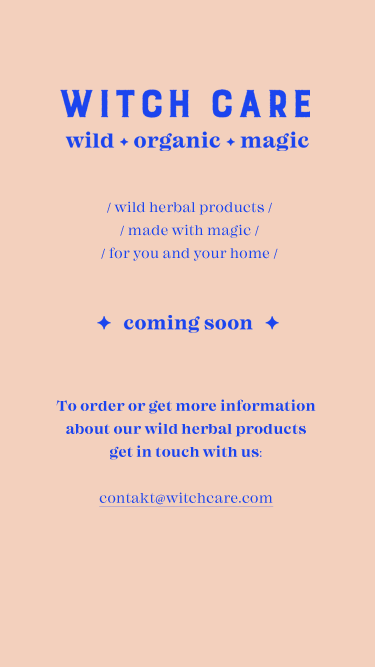
<style>
.page{position:relative;width:375px;height:667px;background:#f3d0bd}
.page>*{position:absolute;margin:0}
.t1{font:14px/23px "MackayDEMO-Regular";letter-spacing:0.025em;color:#1b44ee}
.t2{font:14px/23px "MinionPro-Regular";letter-spacing:0.025em;color:#1b44ee}
.t3{font:14px/23px "MackayDEMO-Bold";letter-spacing:0.025em;color:#1b44ee}
.t4{font:14px/23px "MackayDEMO-Regular";letter-spacing:0.025em;color:#1b44ee;text-decoration:underline}
.t5{font:14px/23px "MinionPro-Regular";letter-spacing:0.025em;color:#1b44ee;text-decoration:underline}
</style>
<div class="page">
<p class="t1" style="left:101px;top:201px;width:177px;height:60px;text-align:center"><span class="t2">/</span> wild herbal products <span class="t2">/<br>/</span> made with magic <span class="t2">/<br>/</span> for you and your home <span class="t2">/</span></p>
<p class="t3" style="left:56px;top:399px;width:260px;height:108px;text-align:center">To order or get more information <br>about our wild herbal products<br>get in touch with us<span class="t2">:<br><br></span><span class="t4">contakt</span><span class="t5">@</span><span class="t4">witchcare.com</span></p>
</div>
